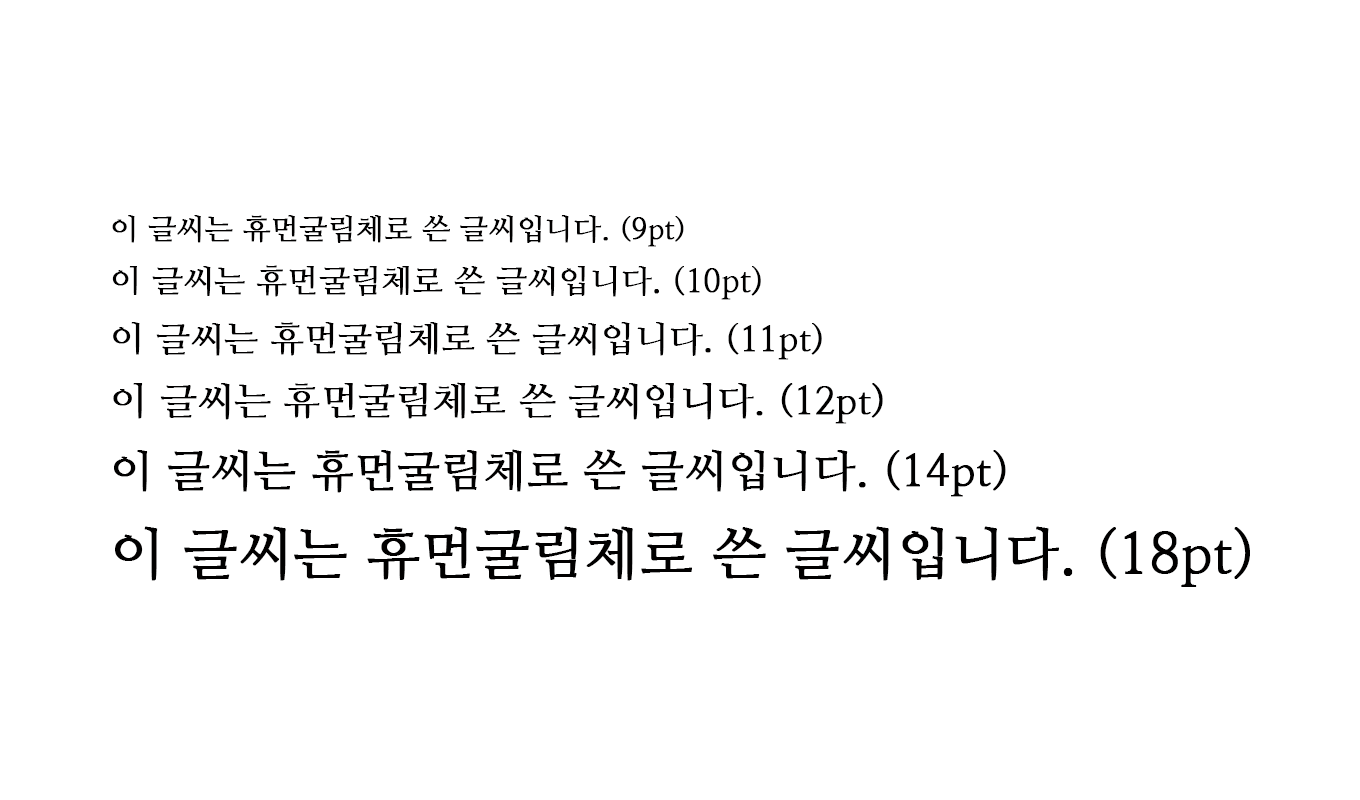
<style>
.page{position:relative;width:1360px;height:800px;background:#ffffff}
.page>*{position:absolute;margin:0}
.t1{font:32px "NanumMyeongjo";color:#010000;font-weight:bold}
.t2{font:29px "NanumMyeongjo";color:#010000;font-weight:bold}
.t3{font:35px "NanumMyeongjo";color:#010000;font-weight:bold}
.t4{font:38px "NanumMyeongjo";color:#010000;font-weight:bold}
.t5{font:44px "NanumMyeongjo";color:#010000;font-weight:bold}
.t6{font:56px "NanumMyeongjo";color:#010000;font-weight:bold}
</style>
<div class="page">
<p class="t1" style="left:112px;top:215px;width:1138px;height:372px"><span class="t2">이 글씨는 휴먼굴림체로 쓴 글씨입니다. (9pt)<br></span>이 글씨는 휴먼굴림체로 쓴 글씨입니다. (10pt)<br><span class="t3">이 글씨는 휴먼굴림체로 쓴 글씨입니다. (11pt)<br></span><span class="t4">이 글씨는 휴먼굴림체로 쓴 글씨입니다. (12pt)<br></span><span class="t5">이 글씨는 휴먼굴림체로 쓴 글씨입니다. (14pt)<br></span><span class="t6">이 글씨는 휴먼굴림체로 쓴 글씨입니다. (18pt)</span></p>
</div>
